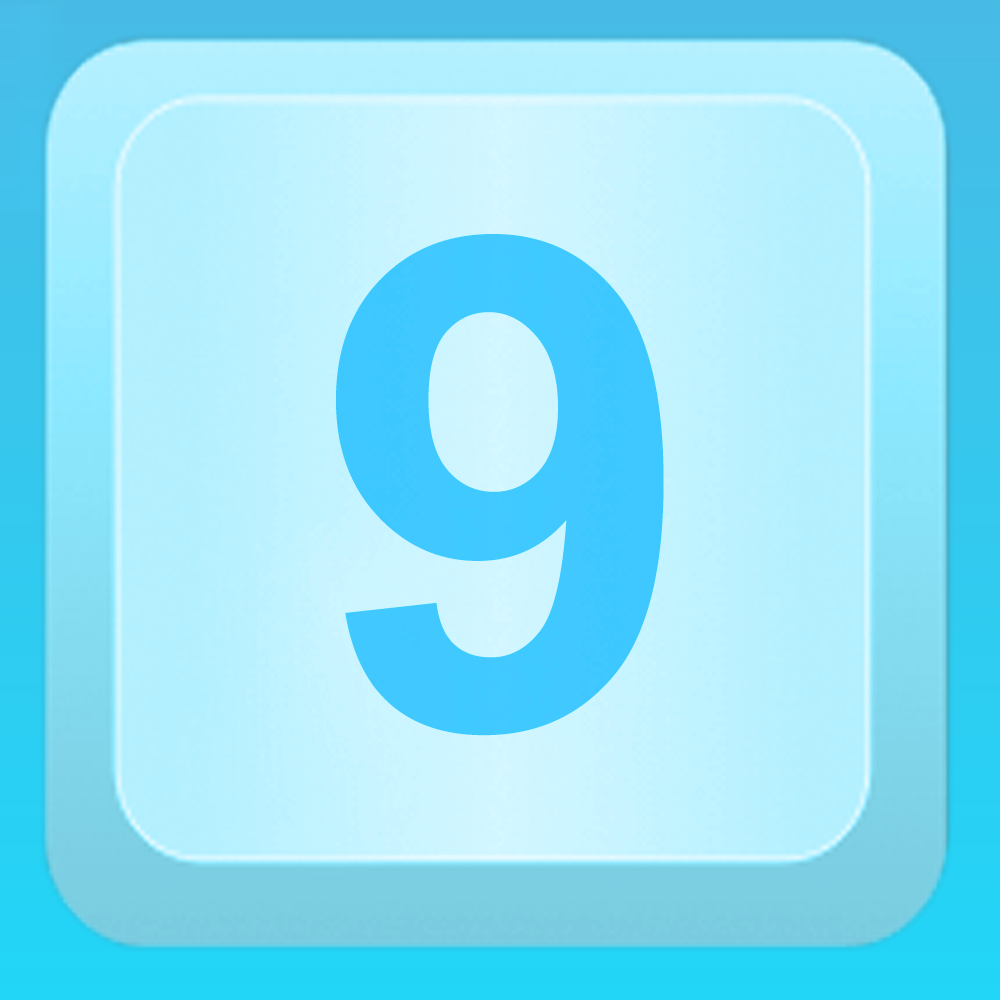
<style>
.page{position:relative;width:1000px;height:1000px}
.page>*{position:absolute;margin:0}
.t1{font:684.9px "Arial-BoldMT";letter-spacing:-0.005em;color:#40c8ff}
</style>
<div class="page">
<p class="t1" style="left:336px;top:234px;width:328px;height:502px">9</p>
</div>
